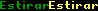
<style>
.page{position:relative;width:98px;height:11px;background:#000000}
.page>*{position:absolute;margin:0}
.t1{font:13.2px "Onesize";color:#009900;scale:0.91 1}
.t2{font:13.2px "Onesize";color:#ffff66;scale:0.91 1}
</style>
<div class="page">
<p class="t1" style="left:0px;top:1px;width:49px;height:8px">Estirar</p>
<p class="t2" style="left:49px;top:1px;width:49px;height:8px">Estirar</p>
</div>
